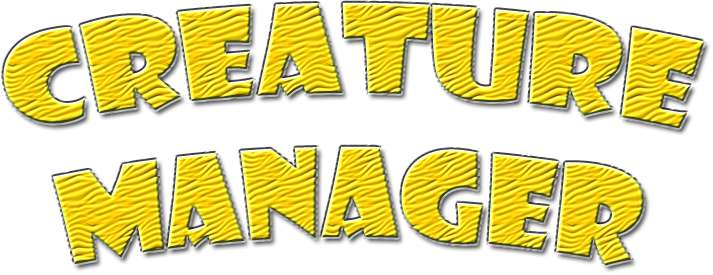
<style>
.page{position:relative;width:713px;height:275px;background:#ffffff}
.page>*{position:absolute;margin:0}
.t1{font:120px "ShowcardGothic-Reg"}
</style>
<div class="page">
<p class="t1" style="left:3px;top:2px;width:702px;height:264px;text-align:center">Creature<br>Manager</p>
</div>
